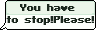
<style>
.page{position:relative;width:96px;height:30px;background:#fcfffb}
.page>*{position:absolute;margin:0}
.t1{font:10px "SFPixelate-Bold";color:#1b281e}
</style>
<div class="page">
<p class="t1" style="left:6px;top:4px;width:87px;height:21px;text-align:center">You have <br>to stop!Please!</p>
<p class="t1" style="left:7px;top:4px;width:87px;height:21px;text-align:center">You have <br>to stop!Please!</p>
</div>
